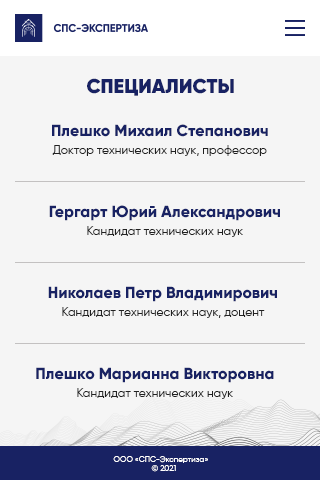
<style>
.page{position:relative;width:320px;height:480px;background:#f5f5f5}
.page>*{position:absolute;margin:0}
.t1{font:20px "Gilroy-Black";color:#182263}
.t2{font:12px/18px "Gilroy-Regular";color:#212121}
.t3{font:16px/18px "Gilroy-Extrabold";color:#182263}
.t4{font:8px "Gilroy-Regular";color:#ffffff}
</style>
<div class="page">
<p class="t1" style="left:87px;top:78px;width:147px;height:18px">СПЕЦИАЛИСТЫ</p>
<p class="t2" style="left:52px;top:124px;width:216px;height:32px;text-align:center"><span class="t3">Плешко Михаил Степанович<br></span>Доктор технических наук, профессор</p>
<p class="t3" style="left:49px;top:205px;width:231px;height:32px;text-align:center">Гергарт Юрий Александрович<br><span class="t2">Кандидат технических наук</span></p>
<p class="t2" style="left:48px;top:286px;width:229px;height:32px;text-align:center"><span class="t3">Николаев Петр Владимирович<br></span>Кандидат технических наук, доцент</p>
<p class="t3" style="left:36px;top:367px;width:238px;height:32px;text-align:center">Плешко Марианна Викторовна<br><span class="t2">Кандидат технических наук</span></p>
<p class="t4" style="left:113px;top:456px;width:95px;height:16px;text-align:center">ООО «СПС-Экспертиза»   <br>© 2021</p>
</div>
